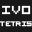
<style>
.page{position:relative;width:32px;height:32px;background:#181818}
.page>*{position:absolute;margin:0}
.t1{font:16px "VisitorTT1BRK";color:#ffffff}
.t2{font:9px "VisitorTT1BRK";color:#ffffff}
</style>
<div class="page">
<p class="t1" style="left:2px;top:5px;width:29px;height:10px">IVO</p>
<p class="t2" style="left:0px;top:21px;width:32px;height:6px">TETRIS</p>
</div>
